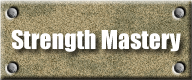
<style>
.page{position:relative;width:192px;height:80px}
.page>*{position:absolute;margin:0}
.t1{font:24px "Impact";color:#ffffff}
</style>
<div class="page">
<p class="t1" style="left:11px;top:29px;width:170px;height:23px">Strength Mastery</p>
</div>
